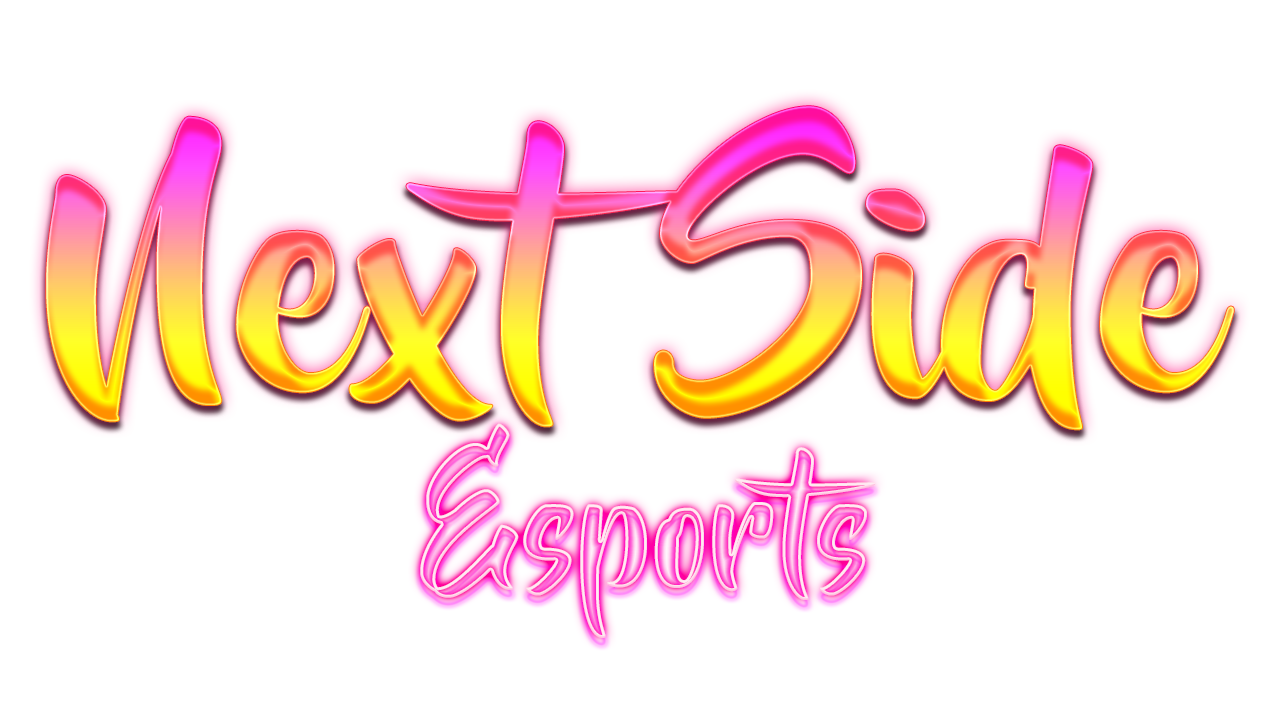
<style>
.page{position:relative;width:1280px;height:720px;background:#ffffff}
.page>*{position:absolute;margin:0}
.t1{font:300px "BeyondTheMountains"}
.t2{font:150.1px "BeyondTheMountains"}
</style>
<div class="page">
<p class="t1" style="left:46px;top:106px;width:1188px;height:324px">Next Side</p>
<p class="t2" style="left:420px;top:423px;width:456px;height:215px">Esports</p>
</div>
